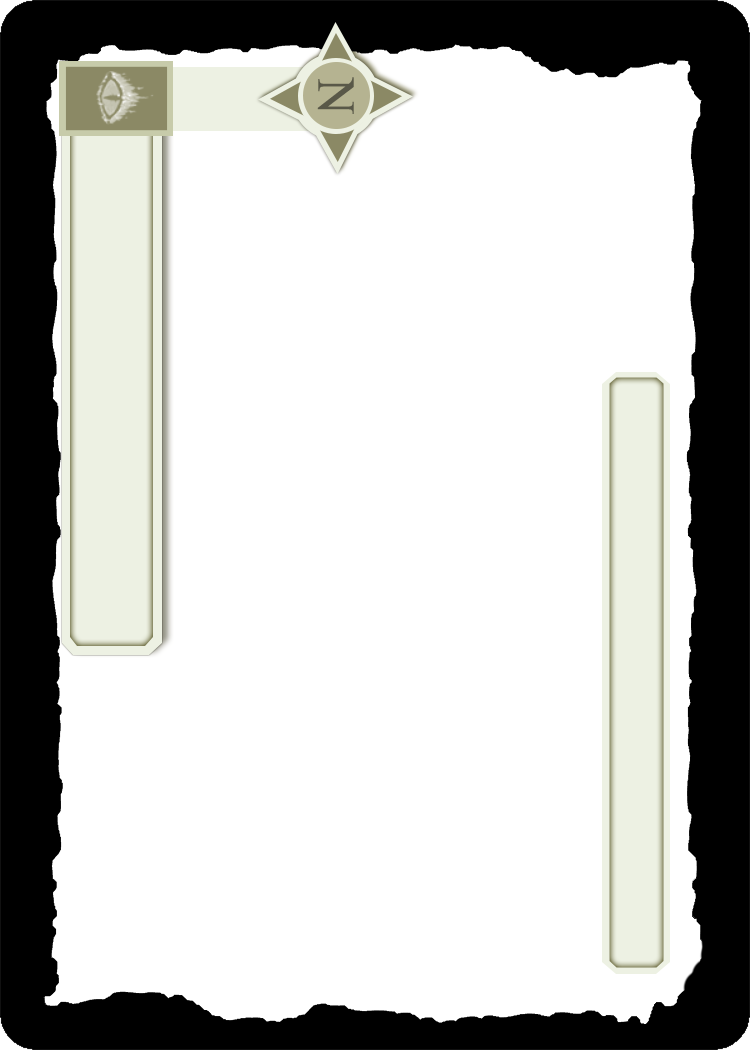
<style>
.page{position:relative;width:750px;height:1050px;background:#ffffff}
.page>*{position:absolute;margin:0}
.t1{font:53px "TimesNewRoman180";color:#595848;font-weight:bold;scale:0.94 1}
</style>
<div class="page">
<p class="t1" style="left:317px;top:77px;width:37px;height:37px;rotate:90deg">N</p>
</div>
